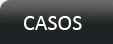
<style>
.page{position:relative;width:113px;height:44px;background:#1e2326}
.page>*{position:absolute;margin:0}
.t1{font:22px "Calibri";color:#ffffff}
</style>
<div class="page">
<p class="t1" style="left:23px;top:16px;width:59px;height:14px">CASOS</p>
</div>
